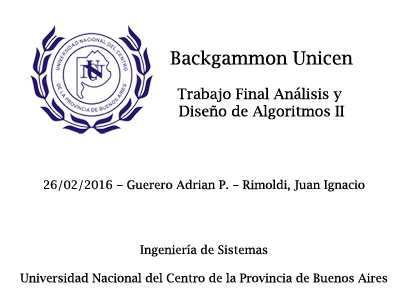
<style>
.page{position:relative;width:400px;height:300px;background:#ffffff}
.page>*{position:absolute;margin:0}
.t1{font:14.4px "LucidaBright";color:#000000}
.t2{font:18px "LucidaBright";color:#000000}
.t3{font:11.8px "LucidaBright";color:#000000}
</style>
<div class="page">
<p class="t1" style="left:170px;top:50px;width:183px;height:70px;text-align:center"><span class="t2">Backgammon Unicen<br></span><br>Trabajo Final Análisis y <br>Diseño de Algoritmos II</p>
<p class="t3" style="left:44px;top:179px;width:321px;height:13px">26/02/2016 - Guerero Adrian P. - Rimoldi, Juan Ignacio</p>
<p class="t3" style="left:20px;top:244px;width:368px;height:39px;text-align:center">Ingeniería de Sistemas<br><br>Universidad Nacional del Centro de la Provincia de Buenos Aires</p>
</div>
